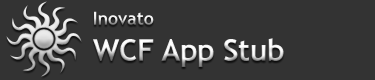
<style>
.page{position:relative;width:375px;height:80px;background:#333333}
.page>*{position:absolute;margin:0}
.t1{font:30px "TrebuchetMS-Bold";letter-spacing:-0.01em}
.t2{font:18px "TrebuchetMS-Bold";letter-spacing:-0.01em}
</style>
<div class="page">
<p class="t1" style="left:93px;top:11px;width:191px;height:56px"><span class="t2">Inovato<br></span>WCF App Stub</p>
</div>
